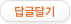
<style>
.page{position:relative;width:71px;height:24px;background:#ffffff}
.page>*{position:absolute;margin:0}
.t1{font:12.1px "YDIYGO340";color:#e46d31;scale:0.91 1}
</style>
<div class="page">
<p class="t1" style="left:15px;top:6px;width:39px;height:11px">답글달기</p>
</div>
